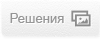
<style>
.page{position:relative;width:100px;height:39px}
.page>*{position:absolute;margin:0}
.t1{font:13px "ArialMT";color:#999999}
</style>
<div class="page">
<p class="t1" style="left:10px;top:13px;width:54px;height:10px">Решения</p>
</div>
